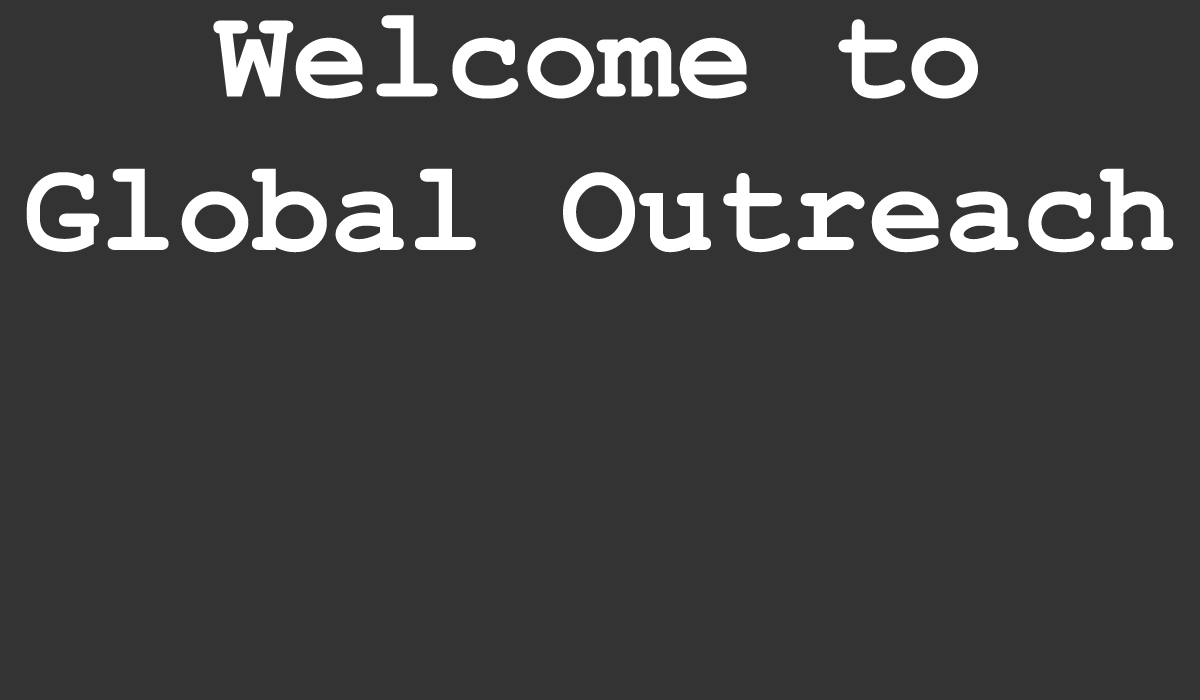
<style>
.page{position:relative;width:1200px;height:700px;background:#333333}
.page>*{position:absolute;margin:0}
.t1{font:128px "CourierNewPS-BoldMT";color:#ffffff}
</style>
<div class="page">
<p class="t1" style="left:26px;top:15px;width:1148px;height:238px;text-align:center">Welcome to<br>Global Outreach</p>
</div>
